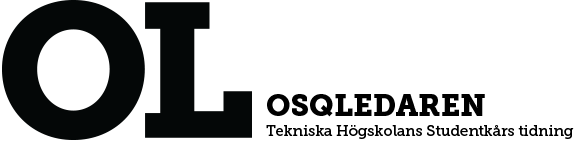
<style>
.page{position:relative;width:574px;height:147px;background:#ffffff}
.page>*{position:absolute;margin:0}
.t1{font:15px/20px "MuseoSlab-500";color:#000000}
.t2{font:30px/20px "MuseoSlab-900";color:#000000}
</style>
<div class="page">
<p class="t1" style="left:266px;top:94px;width:308px;height:45px"><span class="t2">OSQLEDAREN<br></span>Tekniska Högskolans Studentkårs tidning</p>
</div>
